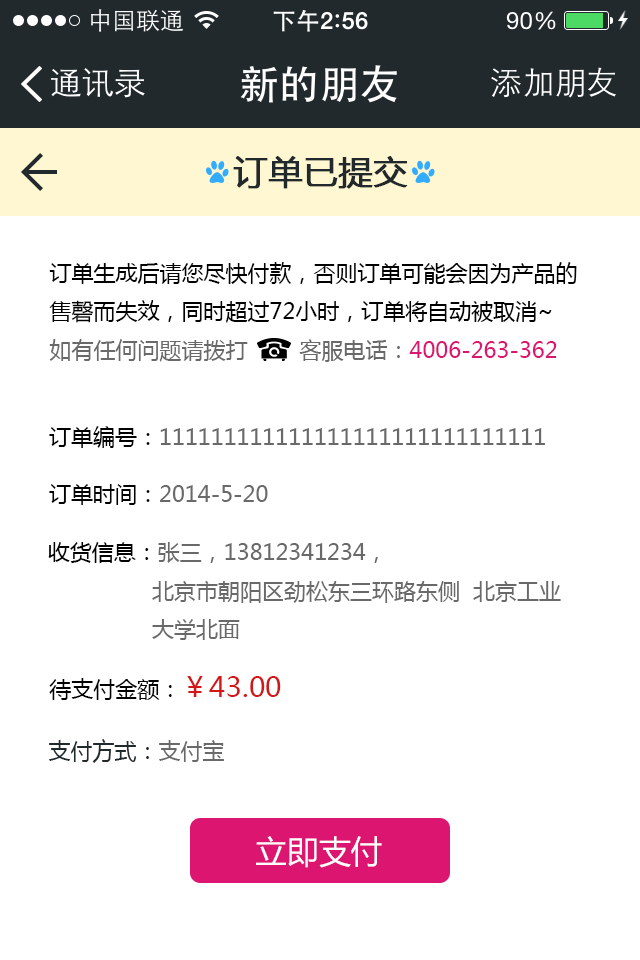
<style>
.page{position:relative;width:640px;height:960px;background:#ffffff}
.page>*{position:absolute;margin:0}
.t1{font:34px "MicrosoftYaHei";color:#22292c;font-weight:bold}
.t2{font:22px "MicrosoftYaHei";color:#000000}
.t3{font:22px "MicrosoftYaHei";color:#696969}
.t4{font:22px "MicrosoftYaHei";color:#dc1570}
.t5{font:28px "MicrosoftYaHei";color:#d11818}
.t6{font:22px "MicrosoftYaHei";color:#22292c}
.t7{font:32.4px "MicrosoftYaHei";color:#ffffff}
</style>
<div class="page">
<p class="t1" style="left:233px;top:156px;width:175px;height:33px">订单已提交</p>
<p class="t2" style="left:49px;top:262px;width:528px;height:100px">订单生成后请您尽快付款，否则订单可能会因为产品的<br>售磬而失效，同时超过72小时，订单将自动被取消~<br><span class="t3">如有任何问题请拨打        客服电话：</span><span class="t4">4006-263-362</span></p>
<p class="t3" style="left:49px;top:426px;width:496px;height:22px"><span class="t2">订单编号：</span>111111111111111111111111111111</p>
<p class="t3" style="left:49px;top:484px;width:219px;height:21px"><span class="t2">订单时间：</span>2014-5-20</p>
<p class="t3" style="left:48px;top:542px;width:513px;height:98px"><span class="t2">收货信息：</span>张三，13812341234，<br>                北京市朝阳区劲松东三环路东侧  北京工业<br>                大学北面</p>
<p class="t2" style="left:49px;top:676px;width:232px;height:24px">待支付金额：<span class="t5">￥43.00</span></p>
<p class="t6" style="left:49px;top:739px;width:175px;height:24px">支付方式：<span class="t3">支付宝</span></p>
<p class="t7" style="left:256px;top:836px;width:126px;height:32px">立即支付</p>
</div>
